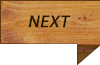
<style>
.page{position:relative;width:100px;height:65px;background:#ffffff}
.page>*{position:absolute;margin:0}
.t1{font:17px "MyriadPro-Regular";letter-spacing:0.022em;color:#261900;text-transform:uppercase;font-weight:bold;font-style:italic}
</style>
<div class="page">
<p class="t1" style="left:28px;top:15px;width:43px;height:13px">Next</p>
</div>
